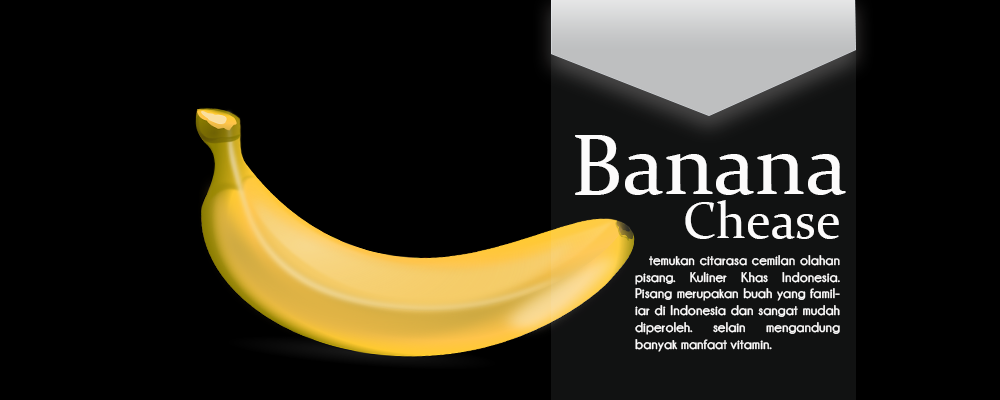
<style>
.page{position:relative;width:1000px;height:400px;background:#000000}
.page>*{position:absolute;margin:0}
.t1{font:86.2px "Constantia";color:#fcfbfb}
.t2{font:51.4px "Constantia";color:#fcfbfb}
.t3{font:14px "Champagne&Limousines-Bold";color:#fcfbfb}
</style>
<div class="page">
<p class="t1" style="left:575px;top:135px;width:271px;height:60px">Banana</p>
<p class="t2" style="left:685px;top:200px;width:154px;height:39px">Chease</p>
<p class="t3" style="left:635px;top:255px;width:205px;height:97px;text-align:justify">temukan citarasa cemilan olahan pisang. Kuliner Khas Indonesia. Pisang merupakan buah yang familiar di Indonesia dan sangat mudah diperoleh. selain mengandung banyak manfaat vitamin.</p>
</div>
